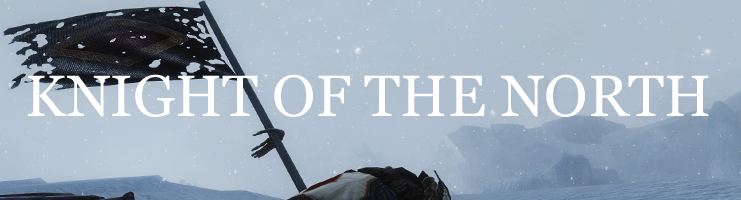
<style>
.page{position:relative;width:741px;height:200px}
.page>*{position:absolute;margin:0}
.t1{font:58.1px "Georgia";color:#ffffff}
</style>
<div class="page">
<p class="t1" style="left:28px;top:74px;width:681px;height:43px">KNIGHT OF THE NORTH</p>
</div>
